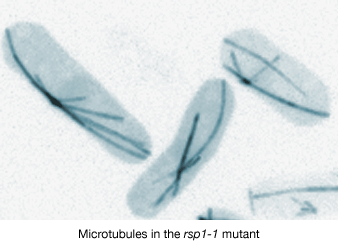
<style>
.page{position:relative;width:338px;height:252px}
.page>*{position:absolute;margin:0}
.t1{font:12px "HelveticaNeue";color:#000000}
.t2{font:12px "HelveticaNeue-Italic";color:#000000}
</style>
<div class="page">
<p class="t1" style="left:79px;top:229px;width:181px;height:12px">Microtubules in the <span class="t2">rsp1-1</span> mutant</p>
</div>
